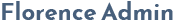
<style>
.page{position:relative;width:174px;height:21px;background:#ffffff}
.page>*{position:absolute;margin:0}
.t1{font:24px "JosefinSans-Bold";color:#475f7b}
</style>
<div class="page">
<p class="t1" style="left:2px;top:1px;width:94px;height:19px">Florence</p>
<p class="t1" style="left:101px;top:1px;width:72px;height:19px">Admin</p>
</div>
